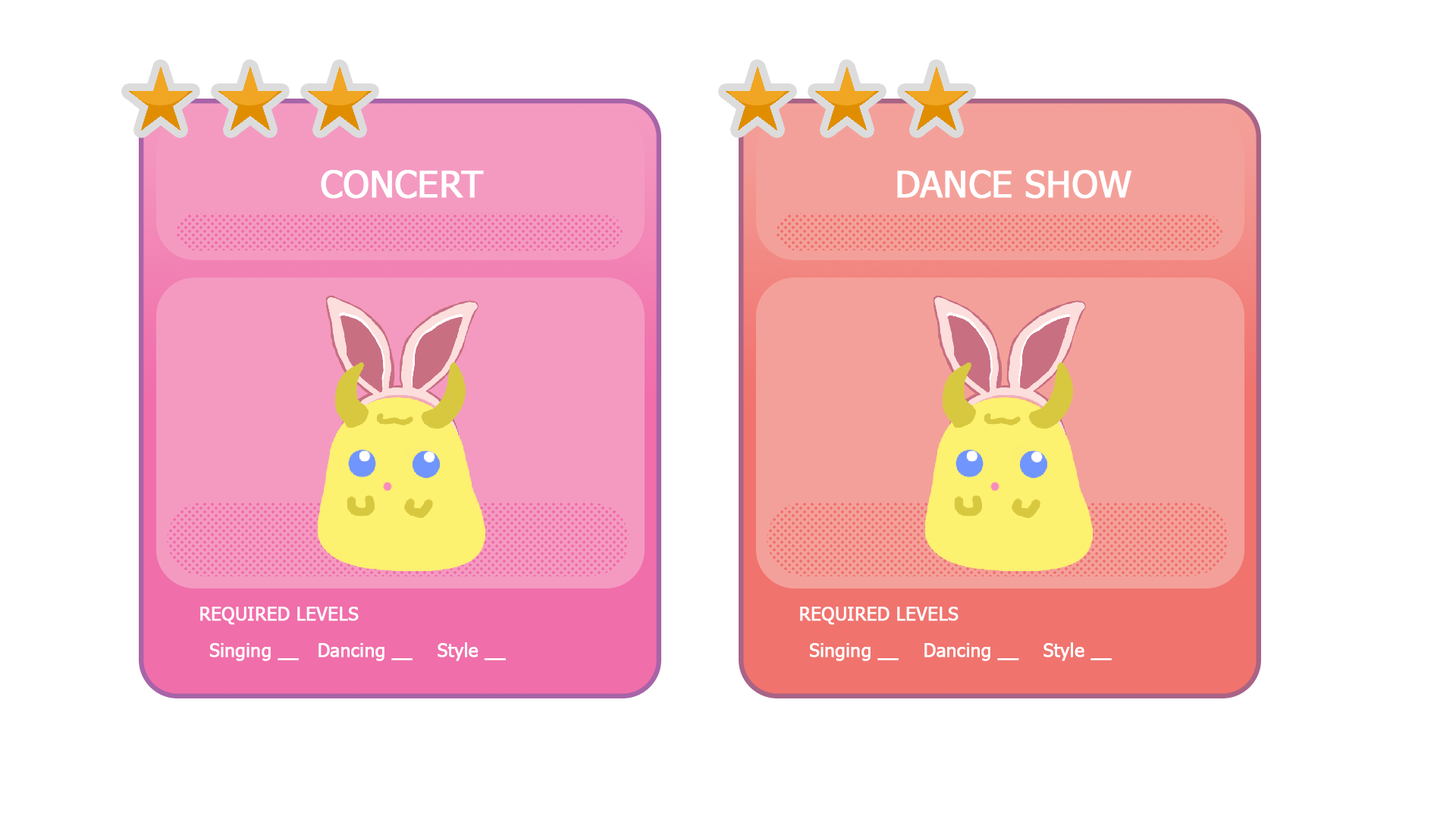
<style>
.page{position:relative;width:1456px;height:819px;background:#ffffff}
.page>*{position:absolute;margin:0}
.t1{font:36.4px "Tahoma";color:#ffffff;font-weight:bold}
.t2{font:18.2px "Tahoma";color:#ffffff;font-weight:bold}
</style>
<div class="page">
<p class="t1" style="left:321px;top:170px;width:163px;height:29px">CONCERT</p>
<p class="t1" style="left:897px;top:170px;width:234px;height:29px">DANCE SHOW</p>
<p class="t2" style="left:200px;top:607px;width:159px;height:18px">REQUIRED LEVELS</p>
<p class="t2" style="left:800px;top:607px;width:159px;height:18px">REQUIRED LEVELS</p>
<p class="t2" style="left:209px;top:642px;width:297px;height:19px">Singing __   Dancing __    Style __</p>
<p class="t2" style="left:809px;top:642px;width:303px;height:19px">Singing __    Dancing __    Style __</p>
</div>
